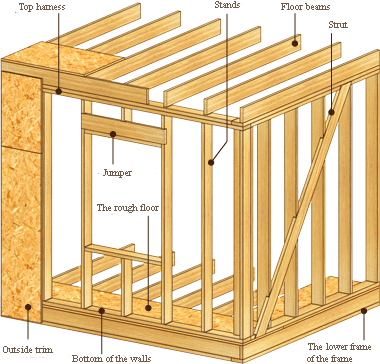
<style>
.page{position:relative;width:380px;height:364px;background:#ffffff}
.page>*{position:absolute;margin:0}
.t1{font:10px "TimesNewRomanPSMT";color:#735b4b}
</style>
<div class="page">
<p class="t1" style="left:19px;top:3px;width:46px;height:9px">Top harness</p>
<p class="t1" style="left:215px;top:1px;width:25px;height:7px">Stands</p>
<p class="t1" style="left:281px;top:3px;width:49px;height:7px">Floor beams</p>
<p class="t1" style="left:329px;top:21px;width:19px;height:7px">Strut</p>
<p class="t1" style="left:103px;top:169px;width:29px;height:9px">Jumper</p>
<p class="t1" style="left:97px;top:204px;width:62px;height:9px">The rough floor</p>
<p class="t1" style="left:3px;top:346px;width:50px;height:7px">Outside trim</p>
<p class="t1" style="left:307px;top:343px;width:64px;height:19px">The lower frame <br>of the frame</p>
<p class="t1" style="left:72px;top:355px;width:79px;height:7px">Bottom of the walls</p>
</div>
